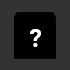
<style>
.page{position:relative;width:70px;height:70px;background:#333333}
.page>*{position:absolute;margin:0}
.t1{font:25px "Roboto-Bold";color:#ffffff}
</style>
<div class="page">
<p class="t1" style="left:30px;top:29px;width:11px;height:18px">?</p>
</div>
